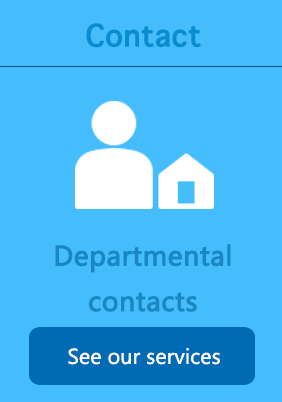
<style>
.page{position:relative;width:282px;height:402px;background:#45bdfd}
.page>*{position:absolute;margin:0}
.t1{font:40px "AppleSymbols";color:#0a8cd1;font-weight:bold}
.t2{font:26px "MicrosoftYaHei";color:#1887c2;font-weight:bold}
.t3{font:20px "MicrosoftYaHei";color:#ffffff}
</style>
<div class="page">
<p class="t1" style="left:86px;top:23px;width:115px;height:25px">Contact</p>
<p class="t2" style="left:55px;top:244px;width:176px;height:68px;text-align:center">Departmental <br>contacts</p>
<p class="t3" style="left:68px;top:348px;width:152px;height:17px">See our services</p>
</div>
